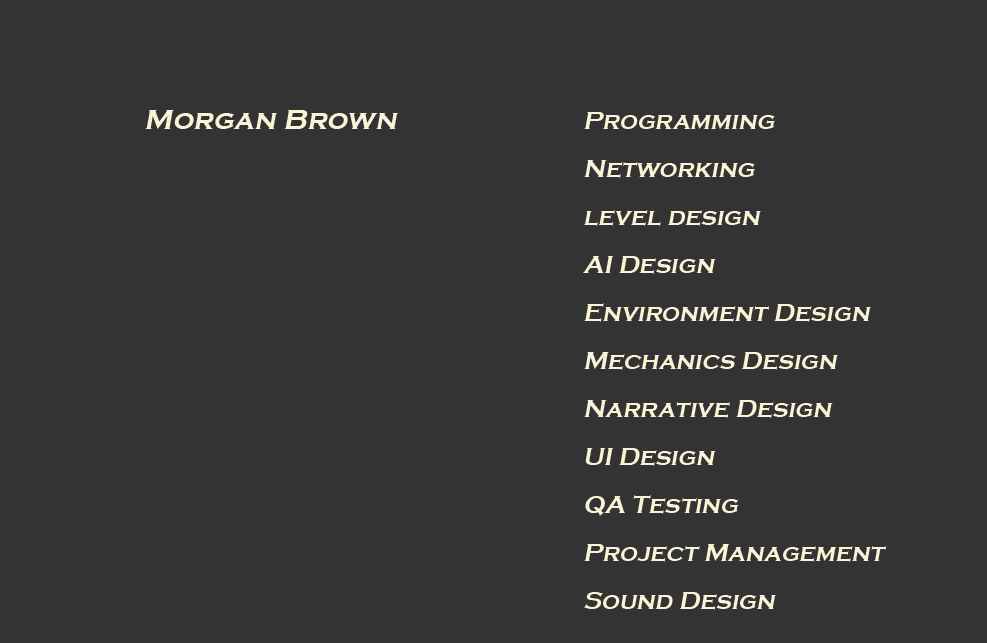
<style>
.page{position:relative;width:987px;height:643px;background:#333333}
.page>*{position:absolute;margin:0}
.t1{font:29.3px "CopperplateGothic-Bold";color:#f9f4d6;font-style:italic}
.t2{font:25px/48px "CopperplateGothic-Bold";color:#f9f4d6;font-style:italic}
</style>
<div class="page">
<p class="t1" style="left:145px;top:110px;width:253px;height:19px">Morgan Brown</p>
<p class="t2" style="left:583px;top:112px;width:304px;height:498px">Programming<br>Networking<br>level design<br>AI Design<br>Environment Design<br>Mechanics Design<br>Narrative Design<br>UI Design<br>QA Testing<br>Project Management<br>Sound Design</p>
</div>
